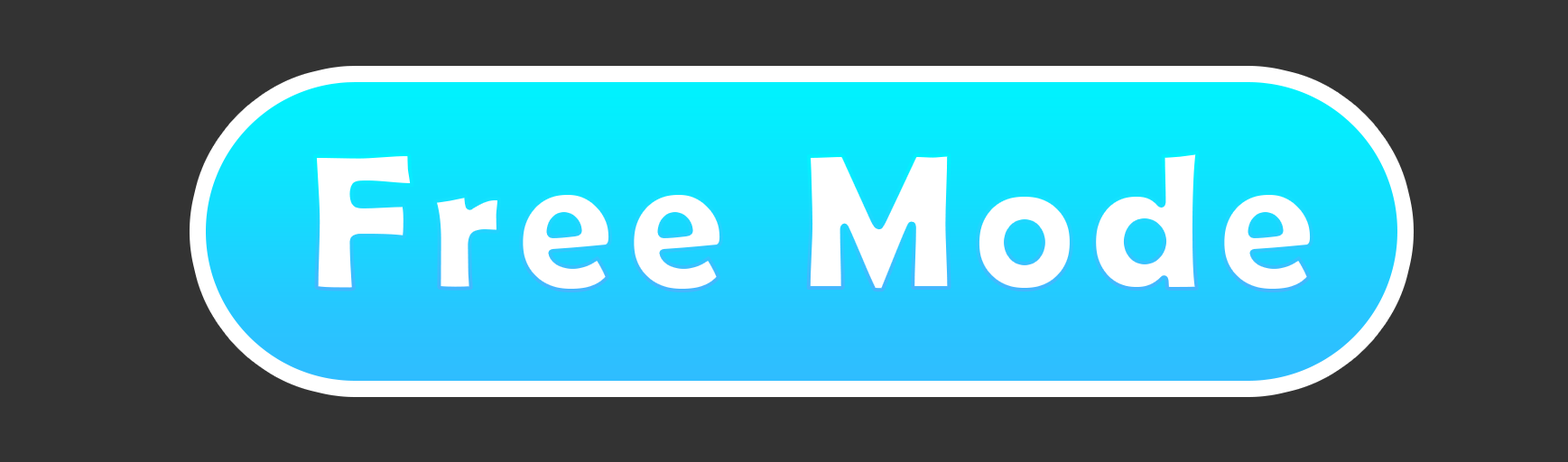
<style>
.page{position:relative;width:1568px;height:462px;background:#333333}
.page>*{position:absolute;margin:0}
.t1{font:197.6px "BerlinSansFBDemi-Bold";letter-spacing:0.06em;color:#ffffff}
</style>
<div class="page">
<p class="t1" style="left:312px;top:151px;width:1002px;height:141px">Free Mode</p>
</div>
